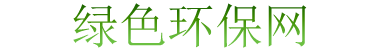
<style>
.page{position:relative;width:381px;height:52px;background:#ffffff}
.page>*{position:absolute;margin:0}
.t1{font:48px "SimSun"}
</style>
<div class="page">
<p class="t1" style="left:73px;top:3px;width:234px;height:45px">绿色环保网</p>
</div>
